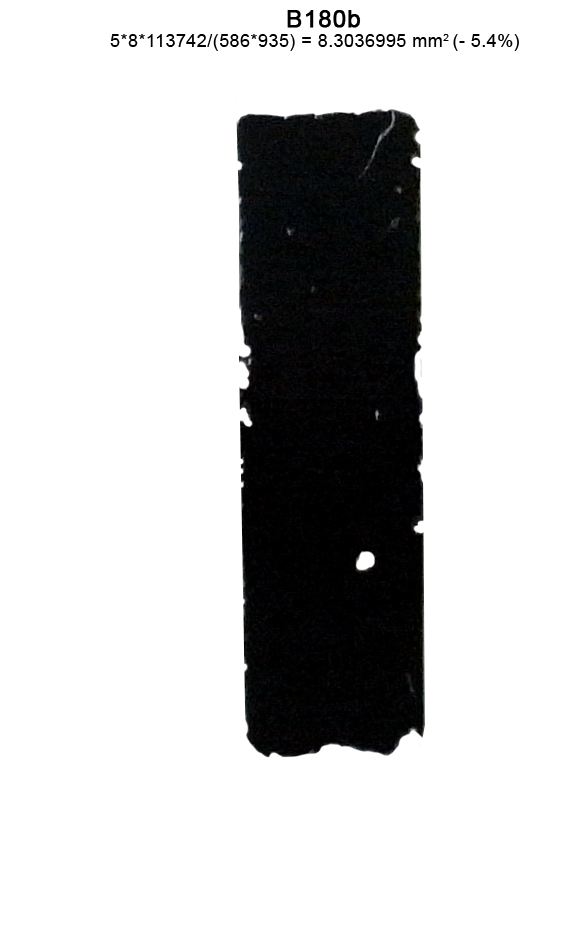
<style>
.page{position:relative;width:586px;height:935px;background:#ffffff}
.page>*{position:absolute;margin:0}
.t1{font:24px "ArialMT";letter-spacing:0.025em;color:#000000;font-weight:bold}
.t2{font:18px "ArialMT";letter-spacing:0.025em;color:#000000}
</style>
<div class="page">
<p class="t1" style="left:287px;top:10px;width:74px;height:18px">B180b</p>
<p class="t2" style="left:110px;top:34px;width:409px;height:17px">5*8*113742/(586*935) = 8.3036995 mm2 (- 5.4%)</p>
</div>
